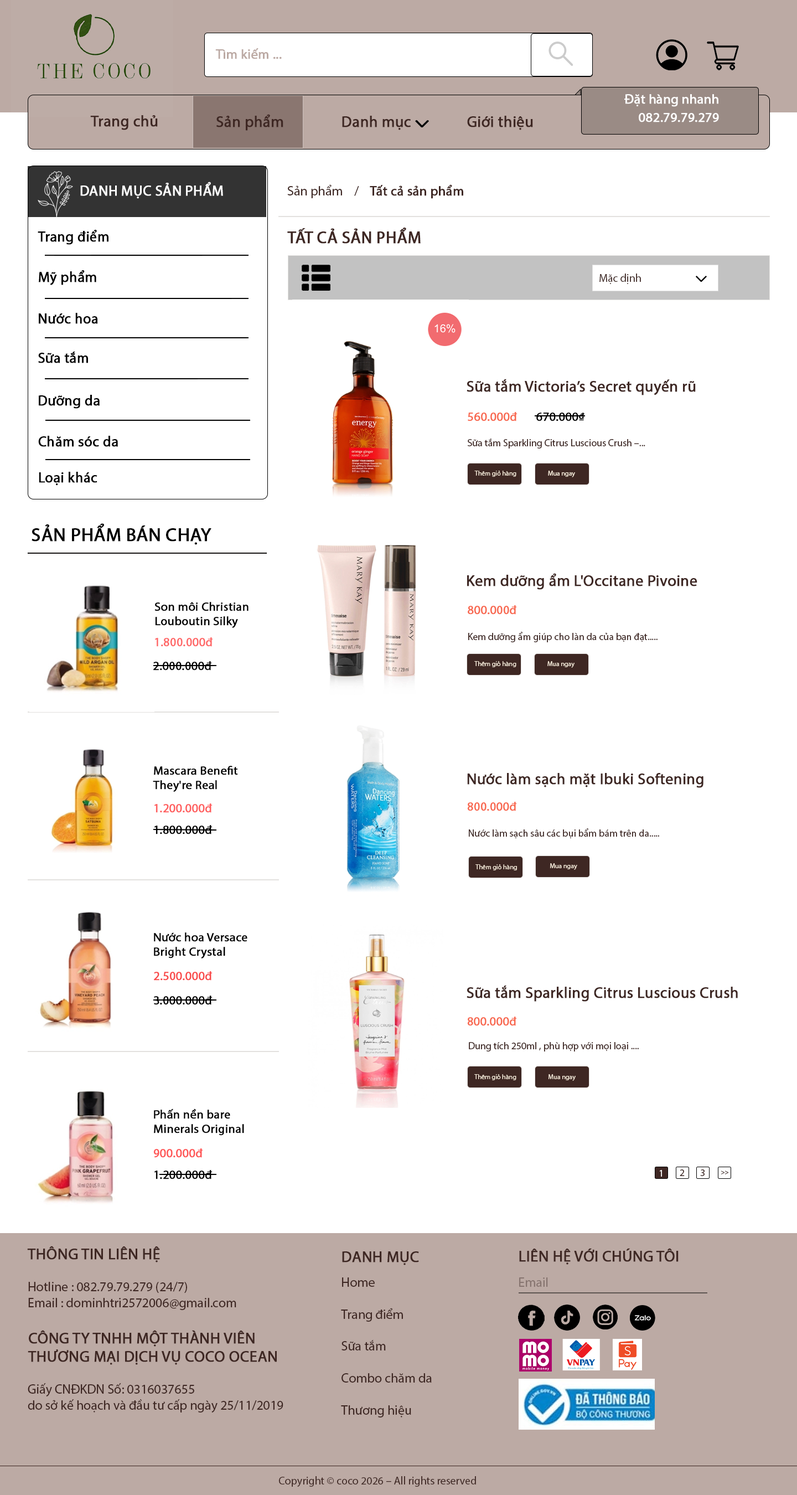
<style>
.page{position:relative;width:797px;height:1495px;background:#ffffff}
.page>*{position:absolute;margin:0}
.t1{font:13.3px "MyriadPro-Regular";color:#bcaaa4;font-weight:bold}
.t2{font:13.3px "MyriadPro-Regular";color:#fefefe;font-weight:bold}
.t3{font:15.5px "MyriadPro-Regular";color:#3e2723;font-weight:bold}
.t4{font:14.4px "MyriadPro-Regular";color:#ffffff;font-weight:bold}
.t5{font:13.3px "MyriadPro-Regular";color:#3e2723;font-weight:bold}
.t6{font:13.3px "MyriadPro-Regular";color:#3e2723}
.t7{font:14.4px "MyriadPro-Regular";color:#000000;font-weight:bold}
.t8{font:16.6px "MyriadPro-Regular";color:#3e2723;font-weight:bold}
.t9{font:11.1px "MyriadPro-Regular";color:#3e2723}
.t10{font:12.2px "MyriadPro-Regular";color:#f8684f;font-weight:bold}
.t11{font:12.2px "MyriadPro-Regular";color:#000000;font-weight:bold}
.t12{font:10px "MyriadPro-Regular";color:#3e2723}
.t13{font:6.6px "MyriadPro-Regular";color:#f5e9d8}
.t14{font:18.8px "MyriadPro-Regular";color:#000000;font-weight:bold}
.t15{font:12.2px "MyriadPro-Regular";color:#ff6767;font-weight:bold}
.t16{font:12.2px "MyriadPro-Regular";color:#ff5e5e;font-weight:bold}
.t17{font:12.2px "MyriadPro-Regular";color:#f94a4a;font-weight:bold}
.t18{font:12.2px "MyriadPro-Regular";color:#ff5555;font-weight:bold}
.t19{font:10px "MyriadPro-Regular";color:#ffffff}
.t20{font:6.6px "MyriadPro-Regular";color:#3e2723}
.t21{font:13.3px "MyriadPro-Regular";color:#86746f}
</style>
<div class="page">
<p class="t1" style="left:215px;top:48px;width:67px;height:11px">Tìm kiếm ...</p>
<p class="t2" style="left:625px;top:94px;width:94px;height:13px">Đặt hàng nhanh</p>
<p class="t2" style="left:639px;top:113px;width:80px;height:9px">082.79.79.279</p>
<p class="t3" style="left:90px;top:115px;width:68px;height:15px">Trang chủ</p>
<p class="t3" style="left:217px;top:114px;width:67px;height:17px">Sản phẩm</p>
<p class="t3" style="left:342px;top:116px;width:69px;height:14px">Danh mục</p>
<p class="t3" style="left:467px;top:116px;width:66px;height:14px">Giới thiệu</p>
<p class="t4" style="left:80px;top:182px;width:143px;height:17px">DANH MỤC SẢN PHẨM</p>
<p class="t5" style="left:287px;top:184px;width:177px;height:15px"><span class="t6">Sản phẩm    /    </span>Tất cả sản phẩm</p>
<p class="t7" style="left:38px;top:230px;width:71px;height:15px">Trang điểm</p>
<p class="t8" style="left:287px;top:228px;width:134px;height:16px">TẤT CẢ SẢN PHẨM</p>
<p class="t7" style="left:39px;top:270px;width:57px;height:15px">Mỹ phẩm</p>
<p class="t9" style="left:600px;top:274px;width:41px;height:10px">Mặc định</p>
<p class="t7" style="left:39px;top:313px;width:59px;height:11px">Nước hoa</p>
<p class="t7" style="left:38px;top:352px;width:50px;height:11px">Sữa tắm</p>
<p class="t3" style="left:467px;top:379px;width:229px;height:16px">Sữa tắm Victoria’s Secret quyến rũ</p>
<p class="t7" style="left:39px;top:395px;width:61px;height:14px">Dưỡng da</p>
<p class="t10" style="left:468px;top:412px;width:50px;height:9px">560.000đ</p>
<p class="t11" style="left:537px;top:413px;width:48px;height:8px">670.000₫</p>
<p class="t7" style="left:38px;top:436px;width:80px;height:11px">Chăm sóc da</p>
<p class="t12" style="left:468px;top:438px;width:178px;height:11px">Sữa tắm Sparkling Citrus Luscious Crush –...</p>
<p class="t7" style="left:39px;top:472px;width:58px;height:14px">Loại khác</p>
<p class="t13" style="left:475px;top:471px;width:42px;height:6px">Thêm giỏ hàng</p>
<p class="t13" style="left:548px;top:471px;width:27px;height:6px">Mua ngay</p>
<p class="t14" style="left:32px;top:523px;width:180px;height:22px">SẢN PHẨM BÁN CHẠY</p>
<p class="t3" style="left:467px;top:573px;width:231px;height:17px">Kem dưỡng ẩm L'Occitane Pivoine</p>
<p class="t11" style="left:155px;top:602px;width:94px;height:26px">Son môi Christian <br>Louboutin Silky</p>
<p class="t10" style="left:468px;top:605px;width:49px;height:10px">800.000đ</p>
<p class="t15" style="left:155px;top:637px;width:58px;height:10px">1.800.000đ</p>
<p class="t12" style="left:469px;top:632px;width:189px;height:10px">Kem dưỡng ẩm giúp cho làn da của bạn đạt.....</p>
<p class="t11" style="left:153px;top:661px;width:59px;height:10px">2.000.000đ</p>
<p class="t13" style="left:475px;top:661px;width:42px;height:6px">Thêm giỏ hàng</p>
<p class="t13" style="left:548px;top:661px;width:27px;height:7px">Mua ngay</p>
<p class="t11" style="left:153px;top:766px;width:85px;height:26px">Mascara Benefit <br>They're Real</p>
<p class="t3" style="left:467px;top:773px;width:237px;height:15px">Nước làm sạch mặt Ibuki Softening</p>
<p class="t16" style="left:155px;top:804px;width:58px;height:9px">1.200.000đ</p>
<p class="t10" style="left:467px;top:802px;width:50px;height:9px">800.000đ</p>
<p class="t11" style="left:155px;top:825px;width:58px;height:10px">1.800.000đ</p>
<p class="t12" style="left:469px;top:828px;width:191px;height:10px">Nước làm sạch sâu các bụi bẩm bám trên da.....</p>
<p class="t13" style="left:476px;top:864px;width:41px;height:7px">Thêm giỏ hàng</p>
<p class="t13" style="left:550px;top:863px;width:28px;height:7px">Mua ngay</p>
<p class="t11" style="left:154px;top:933px;width:94px;height:26px">Nước hoa Versace <br>Bright Crystal</p>
<p class="t17" style="left:154px;top:971px;width:59px;height:10px">2.500.000đ</p>
<p class="t3" style="left:467px;top:985px;width:271px;height:17px">Sữa tắm Sparkling Citrus Luscious Crush</p>
<p class="t11" style="left:154px;top:996px;width:59px;height:9px">3.000.000đ</p>
<p class="t10" style="left:467px;top:1017px;width:50px;height:9px">800.000đ</p>
<p class="t12" style="left:469px;top:1042px;width:170px;height:10px">Dung tích 250ml , phù hợp với mọi loại ....</p>
<p class="t13" style="left:475px;top:1074px;width:42px;height:6px">Thêm giỏ hàng</p>
<p class="t13" style="left:549px;top:1074px;width:27px;height:7px">Mua ngay</p>
<p class="t11" style="left:154px;top:1109px;width:90px;height:27px">Phấn nền bare <br>Minerals Original</p>
<p class="t18" style="left:153px;top:1149px;width:50px;height:9px">900.000đ</p>
<p class="t12" style="left:680px;top:1170px;width:5px;height:6px">2</p>
<p class="t12" style="left:701px;top:1170px;width:4px;height:6px">3</p>
<p class="t11" style="left:155px;top:1170px;width:58px;height:10px">1.200.000đ</p>
<p class="t19" style="left:660px;top:1170px;width:2px;height:7px">1</p>
<p class="t20" style="left:722px;top:1171px;width:7px;height:4px">&gt;&gt;</p>
<p class="t6" style="left:27px;top:1246px;width:209px;height:64px"><span class="t3">THÔNG TIN LIÊN HỆ <br><br></span>Hotline : 082.79.79.279 (24/7)<br>Email : dominhtri2572006@gmail.com</p>
<p class="t3" style="left:342px;top:1252px;width:77px;height:13px">DANH MỤC</p>
<p class="t3" style="left:519px;top:1248px;width:160px;height:17px">LIÊN HỆ VỚI CHÚNG TÔI</p>
<p class="t6" style="left:341px;top:1278px;width:91px;height:140px">Home <br><br>Trang điểm <br><br>Sữa tắm <br><br>Combo chăm da<br><br>Thương hiệu</p>
<p class="t21" style="left:519px;top:1278px;width:29px;height:9px">Email</p>
<p class="t3" style="left:28px;top:1330px;width:249px;height:35px">CÔNG TY TNHH MỘT THÀNH VIÊN <br>THƯƠNG MẠI DỊCH VỤ COCO OCEAN</p>
<p class="t6" style="left:28px;top:1383px;width:256px;height:30px">Giấy CNĐKDN Số: 0316037655 <br>do sở kế hoạch và đầu tư cấp ngày 25/11/2019</p>
<p class="t9" style="left:279px;top:1476px;width:197px;height:11px">Copyright © coco 2026 – All rights reserved</p>
</div>
